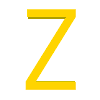
<style>
.page{position:relative;width:100px;height:100px;background:#ffffff}
.page>*{position:absolute;margin:0}
.t1{font:113.3px "DINPro-Regular";color:#ffd200}
</style>
<div class="page">
<p class="t1" style="left:25px;top:9px;width:51px;height:81px">Z</p>
</div>
